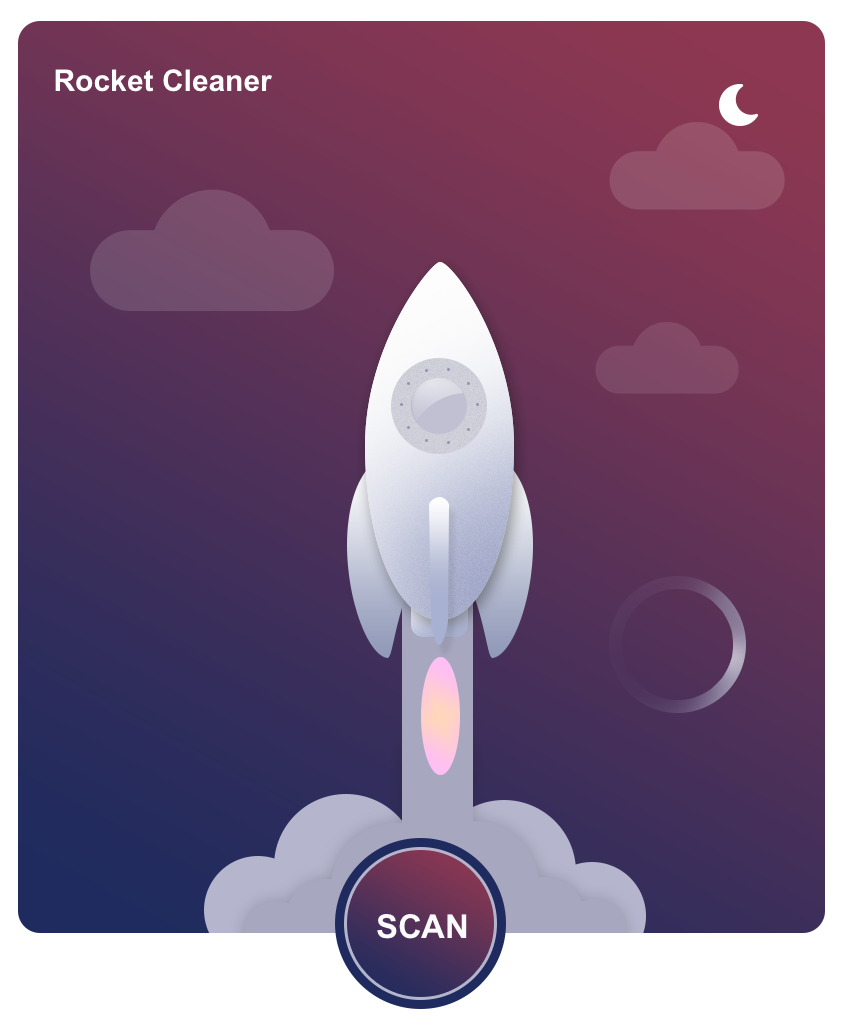
<style>
.page{position:relative;width:847px;height:1029px}
.page>*{position:absolute;margin:0}
.t1{font:30px "Arial-BoldMT";color:#ffffff}
.t2{font:33px "Arial-BoldMT";color:#fbfbfc}
</style>
<div class="page">
<p class="t1" style="left:55px;top:69px;width:217px;height:23px">Rocket Cleaner</p>
<p class="t2" style="left:377px;top:914px;width:90px;height:25px">SCAN</p>
</div>
